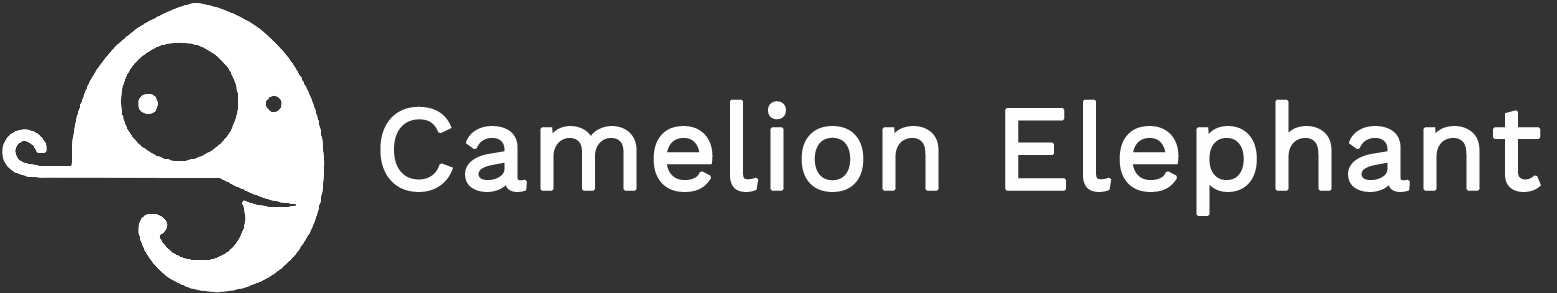
<style>
.page{position:relative;width:1557px;height:293px;background:#333333}
.page>*{position:absolute;margin:0}
.t1{font:120px "WorkSans-Regular";color:#fffefe;font-weight:bold}
</style>
<div class="page">
<p class="t1" style="left:380px;top:99px;width:1161px;height:117px">Camelion Elephant</p>
</div>
